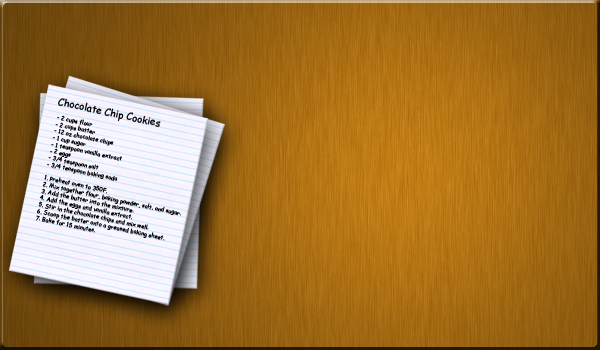
<style>
.page{position:relative;width:600px;height:350px}
.page>*{position:absolute;margin:0}
.t1{font:9.8px "ComicSansMS";color:#000000}
.t2{font:5.7px "ComicSansMS";color:#000000}
</style>
<div class="page">
<p class="t1" style="left:58px;top:98px;width:103px;height:29px;rotate:12deg">Chocolate Chip Cookies</p>
<p class="t2" style="left:36px;top:115px;width:145px;height:126px;rotate:12deg">- 2 cups flour<br>- 2 cups butter<br>- 12 oz chocolate chips<br>- 1 cup sugar<br>- 1 teaspoon vanilla extract<br>- 2 eggs<br>- 3/4 teaspoon salt<br>- 3/4 teaspoon baking soda<br><br>1. Preheat oven to 350F.<br>2. Mix together flour, baking powder, salt, and sugar.<br>3. Add the butter into the mixture.<br>4. Add the eggs and vanilla extract.<br>5. Stir in the chocolate chips and mix well.<br>6. Scoop the batter onto a greased baking sheet.<br>7. Bake for 15 minutes.</p>
</div>
